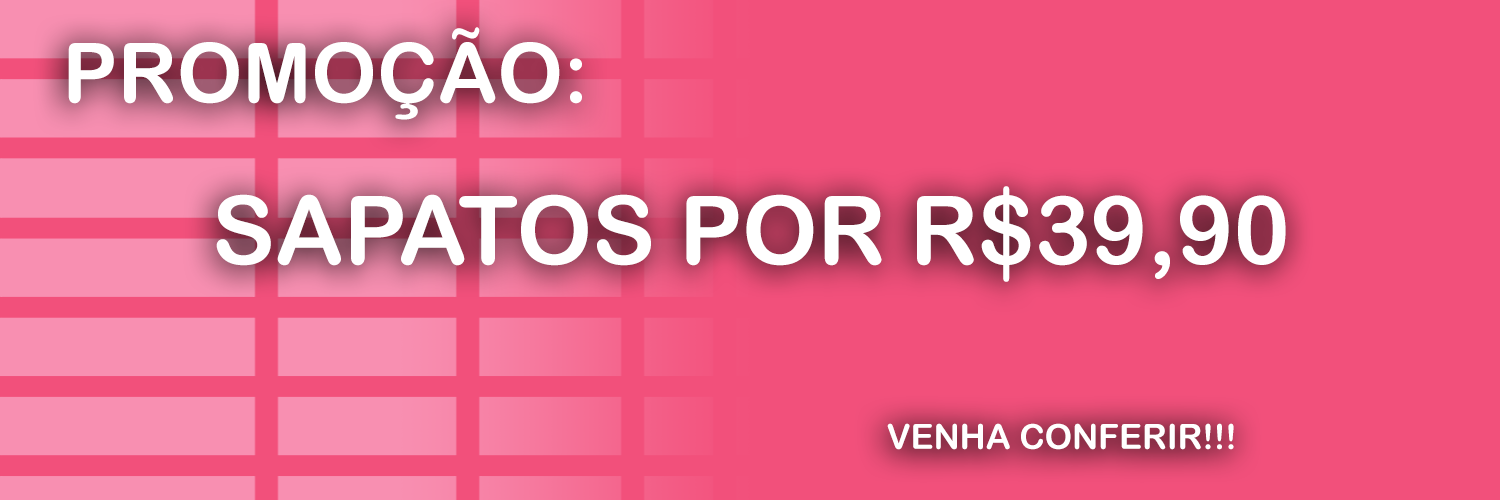
<style>
.page{position:relative;width:1500px;height:500px;background:#f2507b}
.page>*{position:absolute;margin:0}
.t1{font:82.7px "ArialRoundedMTBold";color:#ffffff}
.t2{font:95px "ArialRoundedMTBold";color:#ffffff}
.t3{font:34.5px "ArialRoundedMTBold";color:#ffffff}
</style>
<div class="page">
<p class="t1" style="left:68px;top:27px;width:514px;height:93px">PROMOÇÃO:</p>
<p class="t2" style="left:216px;top:186px;width:1070px;height:96px">SAPATOS POR R$39,90</p>
<p class="t3" style="left:887px;top:423px;width:347px;height:27px">VENHA CONFERIR!!!</p>
</div>
